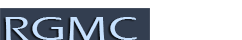
<style>
.page{position:relative;width:242px;height:40px;background:#ffffff}
.page>*{position:absolute;margin:0}
.t1{font:34.2px "ErasITC-Medium";letter-spacing:0.01em;color:#c7e1fe;scale:1.4 1}
</style>
<div class="page">
<p class="t1" style="left:5px;top:17px;width:132px;height:23px">RGMC</p>
</div>
